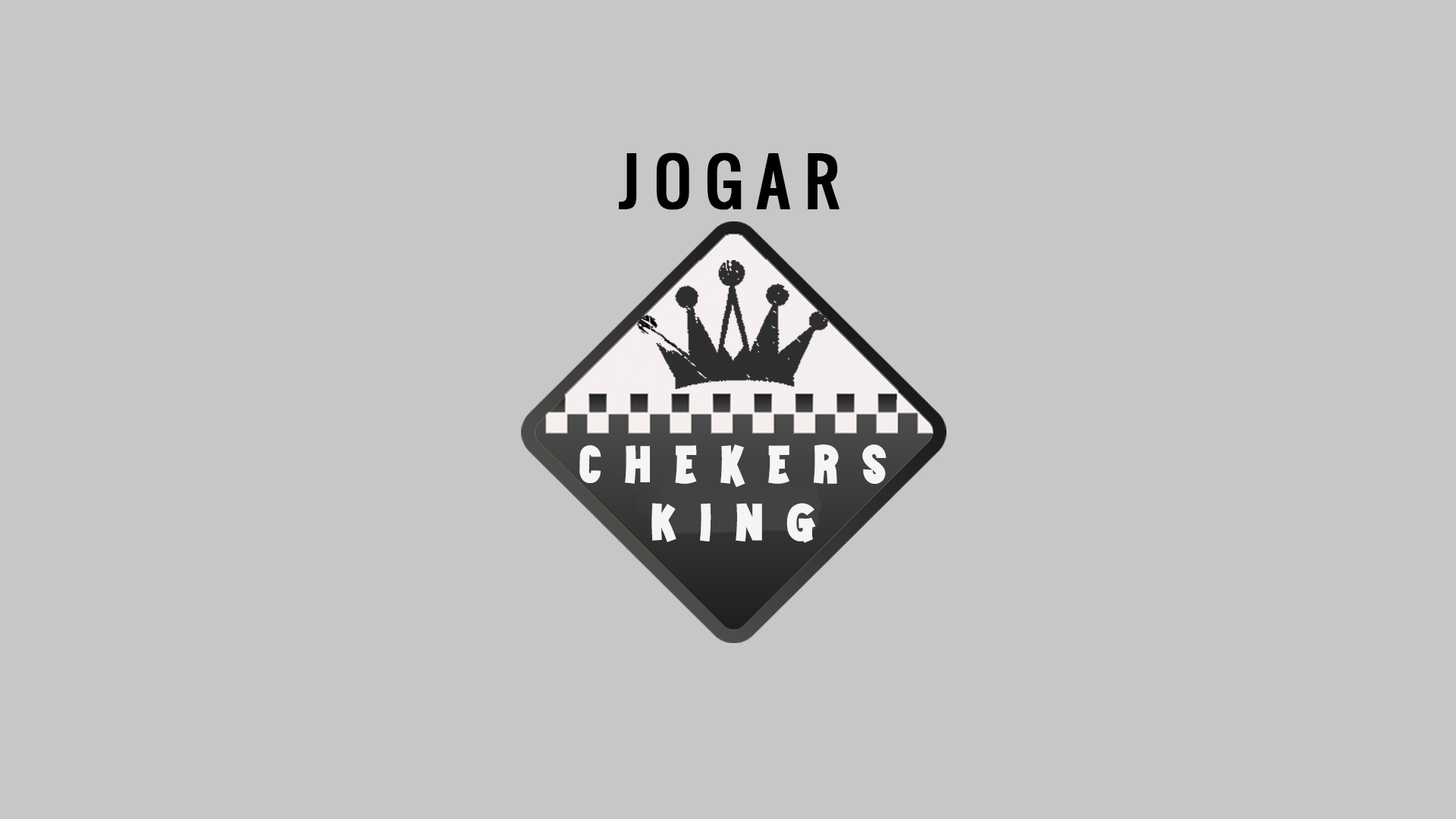
<style>
.page{position:relative;width:1456px;height:819px;background:#c7c7c7}
.page>*{position:absolute;margin:0}
.t1{font:91px "Oswald-Regular";letter-spacing:0.2em;color:#000000;font-variant:small-caps;font-weight:bold}
.t2{font:52.3px "GAMKINGPersonalUse";letter-spacing:0.45em;color:#f6f4f4}
</style>
<div class="page">
<p class="t1" style="left:619px;top:152px;width:220px;height:58px">jogar</p>
<p class="t2" style="left:579px;top:444px;width:307px;height:44px">Chekers</p>
<p class="t2" style="left:651px;top:503px;width:165px;height:40px">King</p>
</div>
